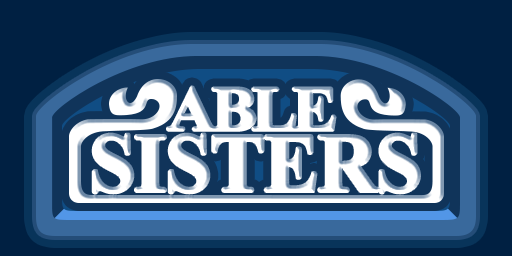
<style>
.page{position:relative;width:512px;height:256px;background:#002042}
.page>*{position:absolute;margin:0}
.t1{font:99px/63px "ShonarBangla-Bold";letter-spacing:-0.03em;color:#ffffff;font-weight:bold}
.t2{font:75px/49px "ShonarBangla-Bold";letter-spacing:-0.08em;color:#ffffff;font-weight:bold;scale:1.08 1}
</style>
<div class="page">
<p class="t1" style="left:92px;top:86px;width:328px;height:108px;text-align:center"><span class="t2">ABLE<br> </span>SISTERS</p>
</div>
